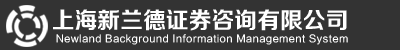
<style>
.page{position:relative;width:400px;height:50px;background:#333333}
.page>*{position:absolute;margin:0}
.t1{font:23px "FZZCHJW--GB1-0";color:#ffffff}
.t2{font:10px "FZLTXHK";letter-spacing:0.06em;color:#ffffff}
</style>
<div class="page">
<p class="t1" style="left:53px;top:9px;width:294px;height:22px">上海新兰德证券咨询有限公司</p>
<p class="t2" style="left:56px;top:34px;width:292px;height:11px">Newland Background Information Management System</p>
</div>
